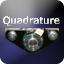
<style>
.page{position:relative;width:64px;height:64px}
.page>*{position:absolute;margin:0}
.t1{font:10px "Verdana"}
</style>
<div class="page">
<p class="t1" style="left:3px;top:16px;width:57px;height:10px">Quadrature</p>
</div>
